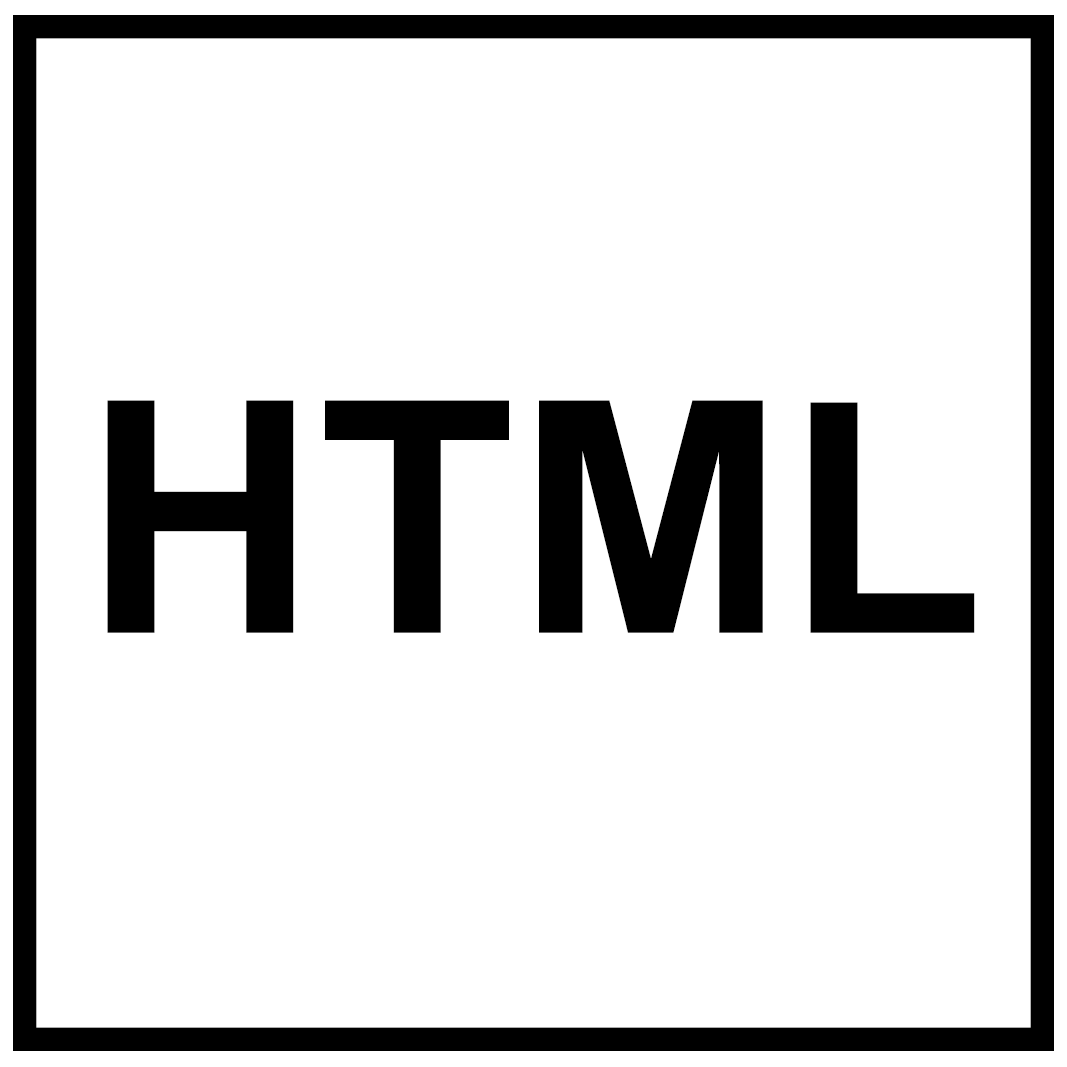
<style>
.page{position:relative;width:1067px;height:1067px;background:#ffffff}
.page>*{position:absolute;margin:0}
.t1{font:324.1px "Arial-BoldMT";color:#000000}
</style>
<div class="page">
<p class="t1" style="left:107px;top:400px;width:868px;height:233px">HTML</p>
</div>
